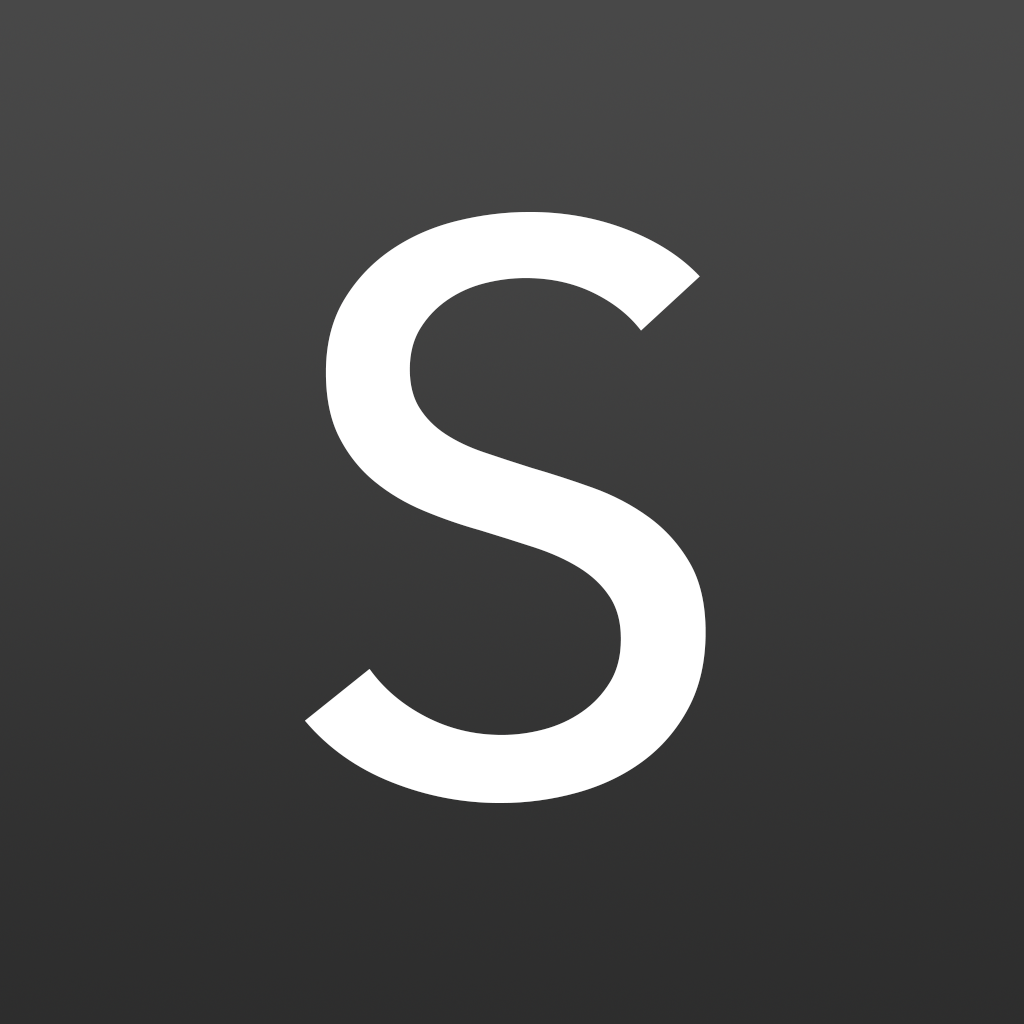
<style>
.page{position:relative;width:1024px;height:1024px}
.page>*{position:absolute;margin:0}
.t1{font:794.5px "AvenirNext-Medium";color:#ffffff;scale:1.05 1}
</style>
<div class="page">
<p class="t1" style="left:305px;top:212px;width:401px;height:591px">S</p>
</div>
